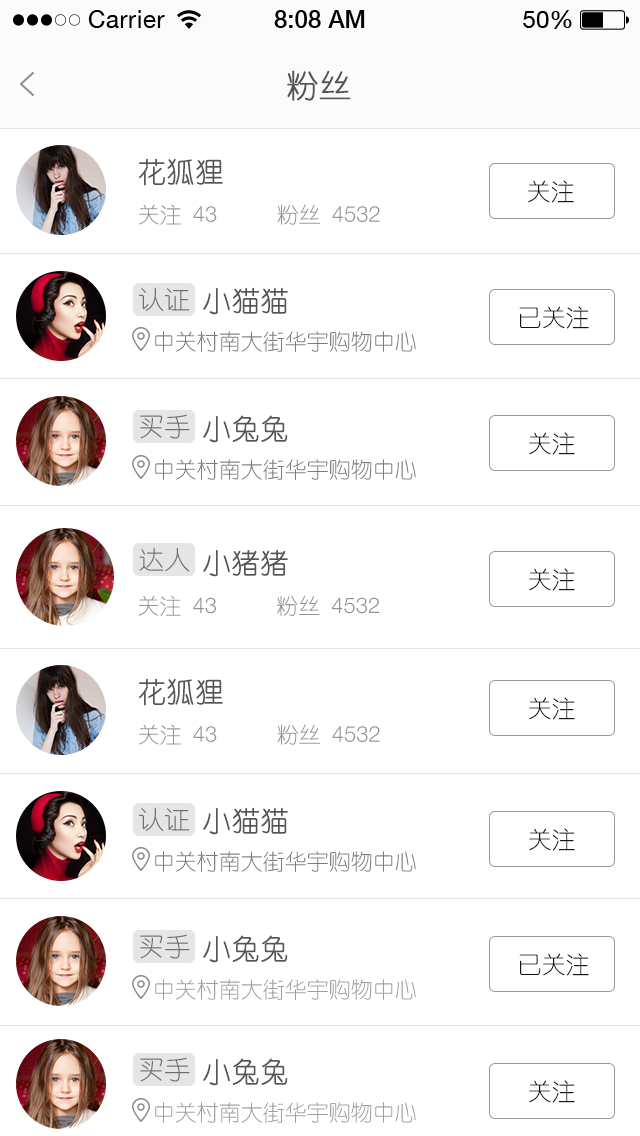
<style>
.page{position:relative;width:640px;height:1136px;background:#ffffff}
.page>*{position:absolute;margin:0}
.t1{font:32px "YouYuan";color:#555555;text-transform:uppercase;font-weight:bold}
.t2{font:28px "YouYuan";color:#555555;text-transform:uppercase;font-weight:bold}
.t3{font:24px "YouYuan";color:#121414}
.t4{font:22px "YouYuan";color:#949494;text-transform:uppercase}
.t5{font:22px "HelveticaNeueLTPro-Lt";color:#949494;text-transform:uppercase}
.t6{font:26px "YouYuan";color:#6e6e6e;text-transform:uppercase}
.t7{font:22px "YouYuan";color:#7b7b7b;text-transform:uppercase}
.t8{font:21.9px "YouYuan";color:#949494;text-transform:uppercase}
.t9{font:21.9px "HelveticaNeueLTPro-Lt";color:#949494;text-transform:uppercase}
.t10{font:22px "YouYuan";color:#9f9f9f;text-transform:uppercase}
</style>
<div class="page">
<p class="t1" style="left:287px;top:70px;width:64px;height:31px">粉丝</p>
<p class="t2" style="left:139px;top:158px;width:84px;height:28px">花狐狸</p>
<p class="t3" style="left:528px;top:180px;width:46px;height:23px">关注</p>
<p class="t4" style="left:139px;top:204px;width:78px;height:21px">关注 <span class="t5">43</span></p>
<p class="t5" style="left:277px;top:204px;width:103px;height:21px"><span class="t4">粉丝 </span>4532</p>
<p class="t6" style="left:139px;top:287px;width:51px;height:24px">认证</p>
<p class="t2" style="left:203px;top:287px;width:85px;height:28px">小猫猫</p>
<p class="t3" style="left:519px;top:306px;width:70px;height:23px">已关注</p>
<p class="t7" style="left:155px;top:331px;width:261px;height:21px">中关村南大街华宇购物中心</p>
<p class="t6" style="left:140px;top:414px;width:50px;height:25px">买手</p>
<p class="t2" style="left:203px;top:415px;width:85px;height:28px">小兔兔</p>
<p class="t3" style="left:529px;top:432px;width:46px;height:23px">关注</p>
<p class="t7" style="left:155px;top:459px;width:261px;height:21px">中关村南大街华宇购物中心</p>
<p class="t6" style="left:139px;top:547px;width:51px;height:25px">达人</p>
<p class="t2" style="left:203px;top:550px;width:85px;height:27px">小猪猪</p>
<p class="t3" style="left:529px;top:568px;width:46px;height:23px">关注</p>
<p class="t8" style="left:138px;top:596px;width:78px;height:20px">关注 <span class="t9">43</span></p>
<p class="t9" style="left:277px;top:595px;width:102px;height:21px"><span class="t8">粉丝 </span>4532</p>
<p class="t2" style="left:139px;top:678px;width:84px;height:28px">花狐狸</p>
<p class="t3" style="left:529px;top:697px;width:46px;height:23px">关注</p>
<p class="t4" style="left:139px;top:724px;width:78px;height:21px">关注 <span class="t5">43</span></p>
<p class="t5" style="left:277px;top:724px;width:103px;height:21px"><span class="t4">粉丝 </span>4532</p>
<p class="t6" style="left:139px;top:807px;width:51px;height:24px">认证</p>
<p class="t2" style="left:203px;top:807px;width:85px;height:28px">小猫猫</p>
<p class="t3" style="left:529px;top:828px;width:46px;height:23px">关注</p>
<p class="t7" style="left:155px;top:851px;width:261px;height:21px">中关村南大街华宇购物中心</p>
<p class="t6" style="left:140px;top:934px;width:50px;height:25px">买手</p>
<p class="t2" style="left:203px;top:935px;width:85px;height:28px">小兔兔</p>
<p class="t3" style="left:519px;top:953px;width:70px;height:23px">已关注</p>
<p class="t10" style="left:155px;top:979px;width:261px;height:21px">中关村南大街华宇购物中心</p>
<p class="t6" style="left:140px;top:1057px;width:50px;height:25px">买手</p>
<p class="t2" style="left:203px;top:1058px;width:85px;height:28px">小兔兔</p>
<p class="t3" style="left:529px;top:1080px;width:46px;height:23px">关注</p>
<p class="t10" style="left:155px;top:1102px;width:261px;height:21px">中关村南大街华宇购物中心</p>
</div>
